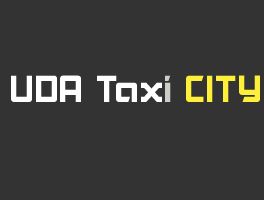
<style>
.page{position:relative;width:264px;height:200px;background:#333333}
.page>*{position:absolute;margin:0}
.t1{font:36px "UTM-Akashi";color:#ffffff}
.t2{font:36px "UTM-Akashi";color:#cecdc9}
.t3{font:36px "UTM-Akashi";color:#feef39}
</style>
<div class="page">
<p class="t1" style="left:11px;top:75px;width:249px;height:27px">UDA Tax<span class="t2">i </span><span class="t3">CITY</span></p>
</div>
